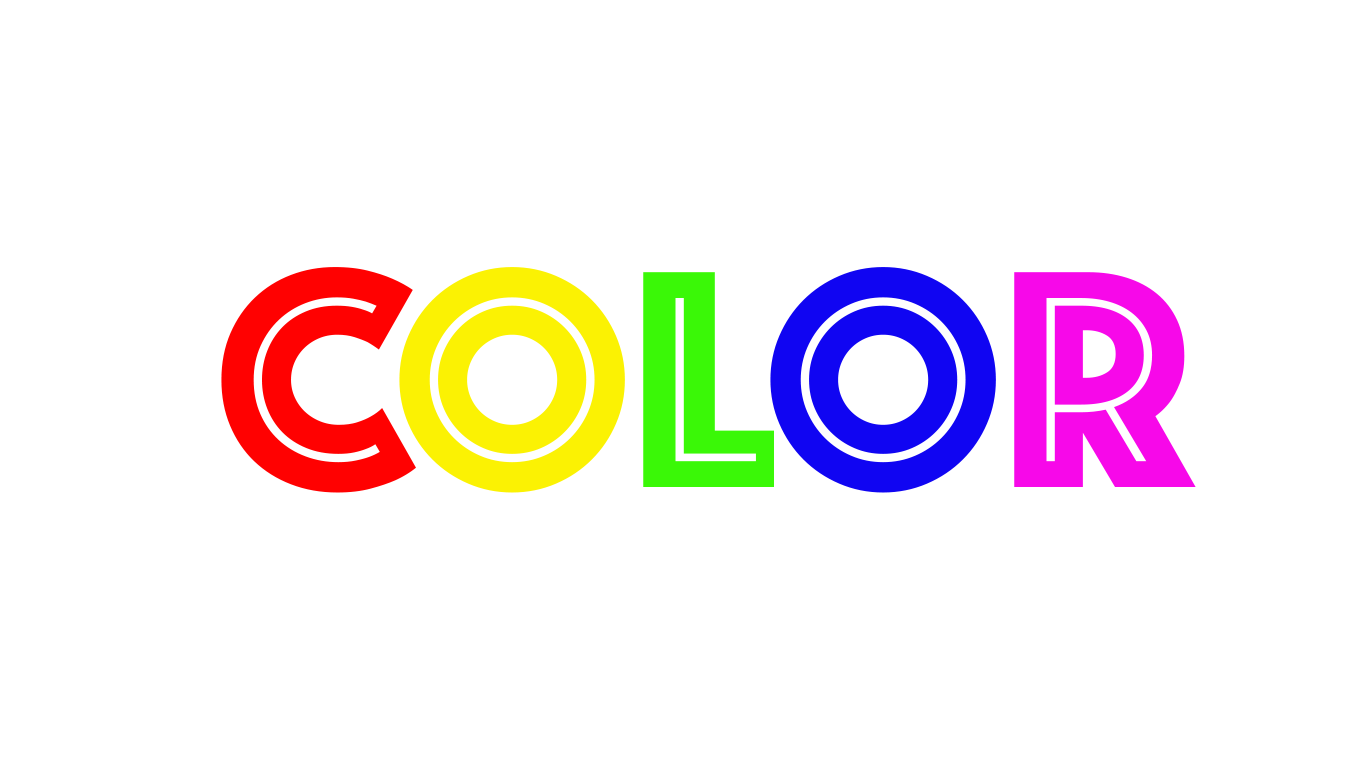
<style>
.page{position:relative;width:1366px;height:768px;background:#ffffff}
.page>*{position:absolute;margin:0}
.t1{font:322.4px "Phosphate-Inline";color:#ff0101}
.t2{font:322.4px "Phosphate-Inline";color:#fbf203}
.t3{font:322.4px "Phosphate-Inline";color:#3af807}
.t4{font:322.4px "Phosphate-Inline";color:#1005f2}
.t5{font:322.4px "Phosphate-Inline";color:#f708e9}
</style>
<div class="page">
<p class="t1" style="left:221px;top:267px;width:975px;height:226px">C<span class="t2">O</span><span class="t3">L</span><span class="t4">O</span><span class="t5">R</span></p>
</div>
